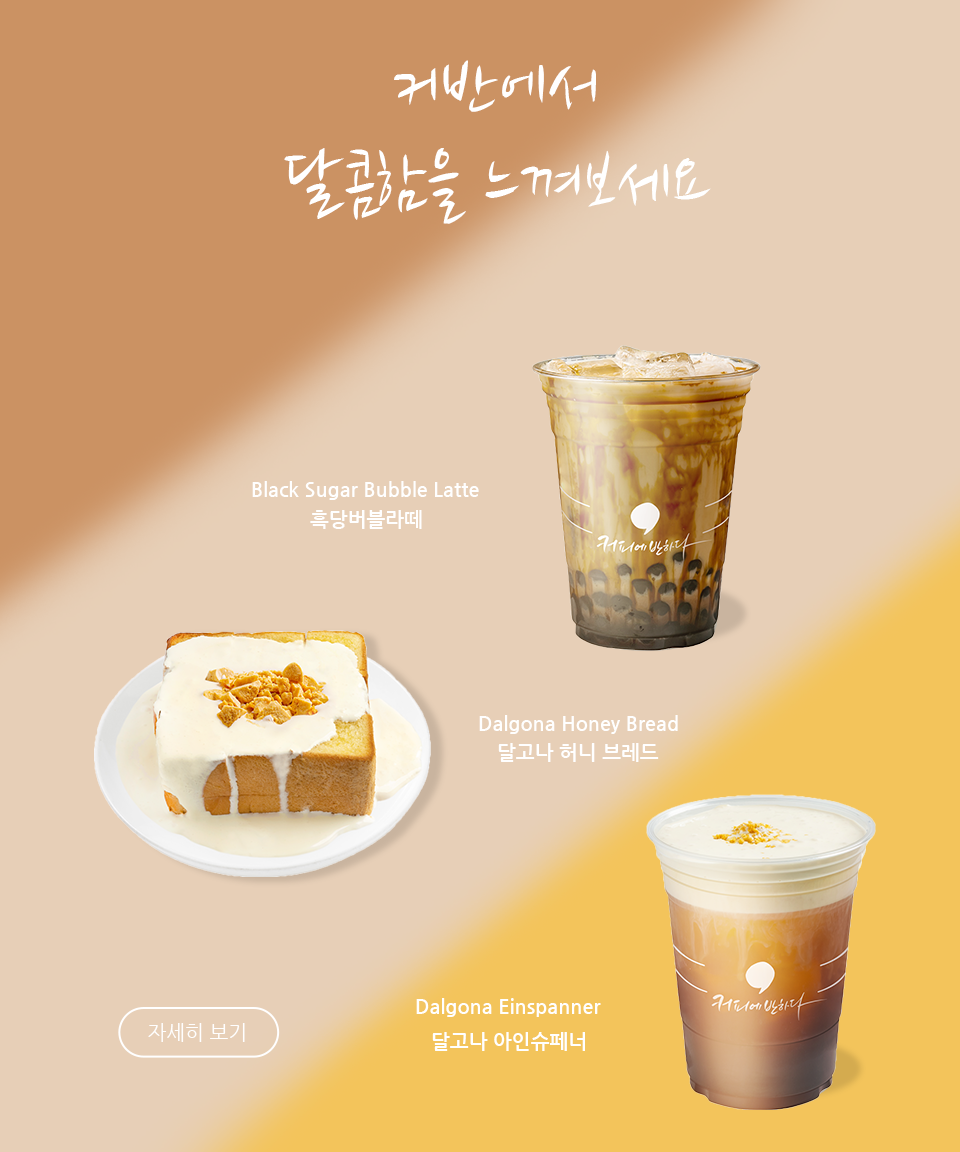
<style>
.page{position:relative;width:960px;height:1152px;background:#e7cfb7}
.page>*{position:absolute;margin:0}
.t1{font:80px "NanumBrush";color:#ffffff}
.t2{font:20px "NanumGothicBold";color:#ffffff}
.t3{font:20px "NanumGothic";color:#ffffff}
</style>
<div class="page">
<p class="t1" style="left:284px;top:60px;width:427px;height:164px;text-align:center">커반에서<br>달콤함을 느껴보세요</p>
<p class="t2" style="left:252px;top:481px;width:227px;height:19px">Black Sugar Bubble Latte</p>
<p class="t2" style="left:310px;top:510px;width:112px;height:19px">흑당버블라떼</p>
<p class="t2" style="left:479px;top:715px;width:199px;height:19px">Dalgona Honey Bread</p>
<p class="t2" style="left:498px;top:743px;width:161px;height:19px">달고나 허니 브레드</p>
<p class="t2" style="left:416px;top:998px;width:185px;height:19px">Dalgona Einspanner</p>
<p class="t3" style="left:148px;top:1023px;width:97px;height:19px">자세히 보기</p>
<p class="t2" style="left:432px;top:1032px;width:153px;height:19px">달고나 아인슈페너</p>
</div>
